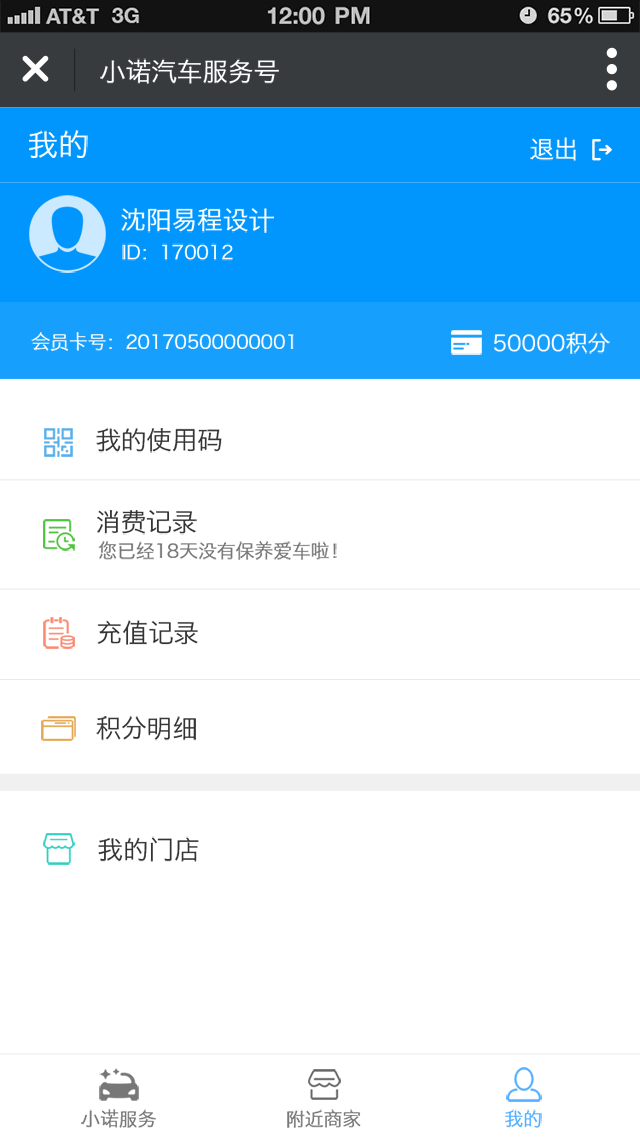
<style>
.page{position:relative;width:640px;height:1138px;background:#ffffff}
.page>*{position:absolute;margin:0}
.t1{font:25.6px "HiraginoSansGB-W3";color:#ffffff}
.t2{font:30.7px "HiraginoSansGB-W3";color:#ffffff}
.t3{font:23.9px "HiraginoSansGB-W3";color:#ffffff}
.t4{font:18.8px "HiraginoSansGB-W3";color:#ffffff}
.t5{font:20.5px "HiraginoSansGB-W3";color:#ffffff}
.t6{font:22.2px "HiraginoSansGB-W3";color:#ffffff}
.t7{font:25.6px "HiraginoSansGB-W3";color:#333333}
.t8{font:18.8px "HiraginoSansGB-W3";color:#777777}
.t9{font:18.8px "HiraginoSansGB-W3";color:#53afff}
</style>
<div class="page">
<p class="t1" style="left:100px;top:58px;width:179px;height:26px">小诺汽车服务号</p>
<p class="t2" style="left:29px;top:130px;width:59px;height:28px">我的</p>
<p class="t3" style="left:530px;top:137px;width:46px;height:24px">退出</p>
<p class="t1" style="left:121px;top:208px;width:153px;height:25px">沈阳易程设计</p>
<p class="t4" style="left:122px;top:243px;width:111px;height:18px">ID：170012</p>
<p class="t4" style="left:31px;top:332px;width:263px;height:19px"><span class="t5"><br></span>会员卡号：20170500000001</p>
<p class="t6" style="left:494px;top:332px;width:116px;height:22px">50000积分</p>
<p class="t7" style="left:96px;top:428px;width:126px;height:25px">我的使用码</p>
<p class="t7" style="left:97px;top:510px;width:100px;height:25px">消费记录</p>
<p class="t8" style="left:98px;top:541px;width:239px;height:19px">您已经18天没有保养爱车啦！</p>
<p class="t7" style="left:97px;top:620px;width:101px;height:25px">充值记录</p>
<p class="t7" style="left:96px;top:716px;width:100px;height:25px">积分明细</p>
<p class="t7" style="left:98px;top:836px;width:101px;height:26px">我的门店</p>
<p class="t8" style="left:81px;top:1109px;width:75px;height:19px">小诺服务</p>
<p class="t8" style="left:287px;top:1109px;width:74px;height:19px">附近商家</p>
<p class="t9" style="left:505px;top:1109px;width:37px;height:19px">我的</p>
</div>
